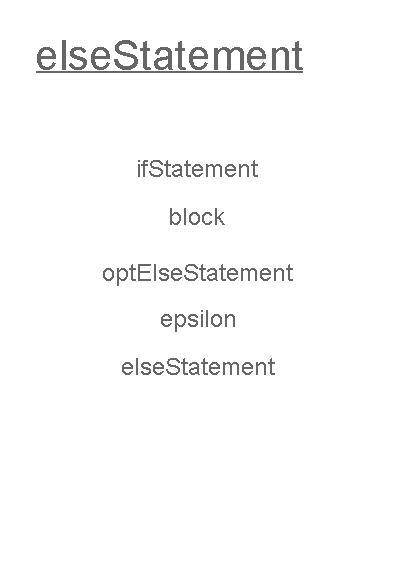
<style>
.page{position:relative;width:396px;height:576px;background:#ffffff}
.page>*{position:absolute;margin:0}
.t1{font:42px "ArialMT";color:#666666}
.t2{font:24px "ArialMT";color:#666666}
.t3{font:12px "ArialMT";color:#666666}
</style>
<div class="page">
<p class="t1" style="left:37px;top:40px;width:266px;height:30px">elseStatement</p>
<p class="t2" style="left:138px;top:160px;width:120px;height:17px">ifStatement</p>
<p class="t3" style="left:170px;top:208px;width:55px;height:17px">block</p>
<p class="t3" style="left:103px;top:264px;width:190px;height:22px">optElseStatement</p>
<p class="t3" style="left:161px;top:310px;width:74px;height:22px">epsilon</p>
<p class="t3" style="left:122px;top:358px;width:153px;height:17px">elseStatement</p>
</div>
